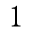
<style>
.page{position:relative;width:32px;height:32px;background:#ffffff}
.page>*{position:absolute;margin:0}
.t1{font:30px "SimSun";color:#010101}
</style>
<div class="page">
<p class="t1" style="left:11px;top:5px;width:10px;height:22px">1</p>
</div>
